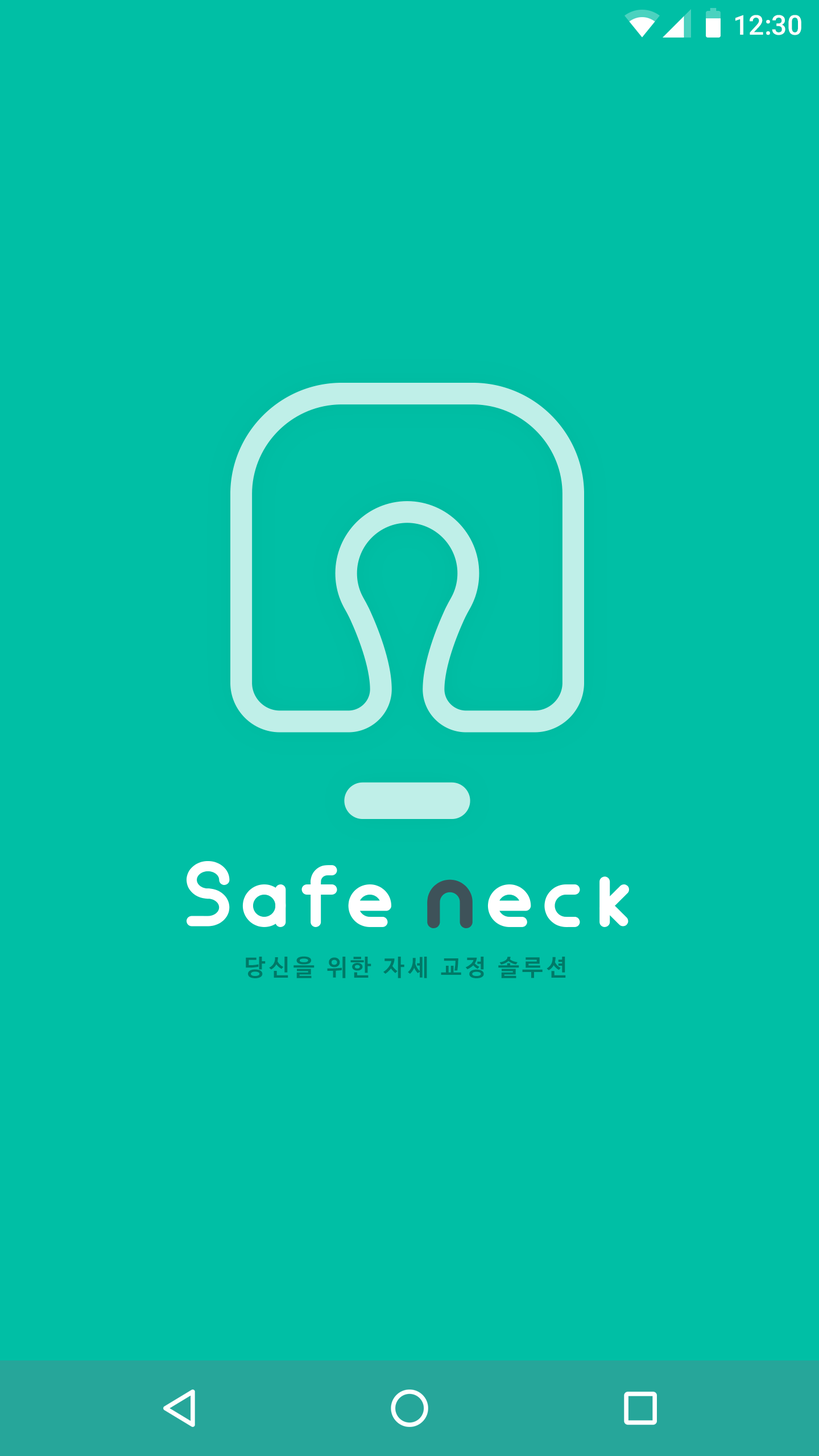
<style>
.page{position:relative;width:819px;height:1456px;background:#00bfa5}
.page>*{position:absolute;margin:0}
.t1{font:27.3px "Roboto-Medium";color:#ffffff}
.t2{font:23.2px "NanumBarunGothicBold";letter-spacing:0.15em;color:#007967}
</style>
<div class="page">
<p class="t1" style="left:735px;top:15px;width:66px;height:20px">12:30</p>
<p class="t2" style="left:246px;top:956px;width:320px;height:22px">당신을 위한 자세 교정 솔루션</p>
</div>
